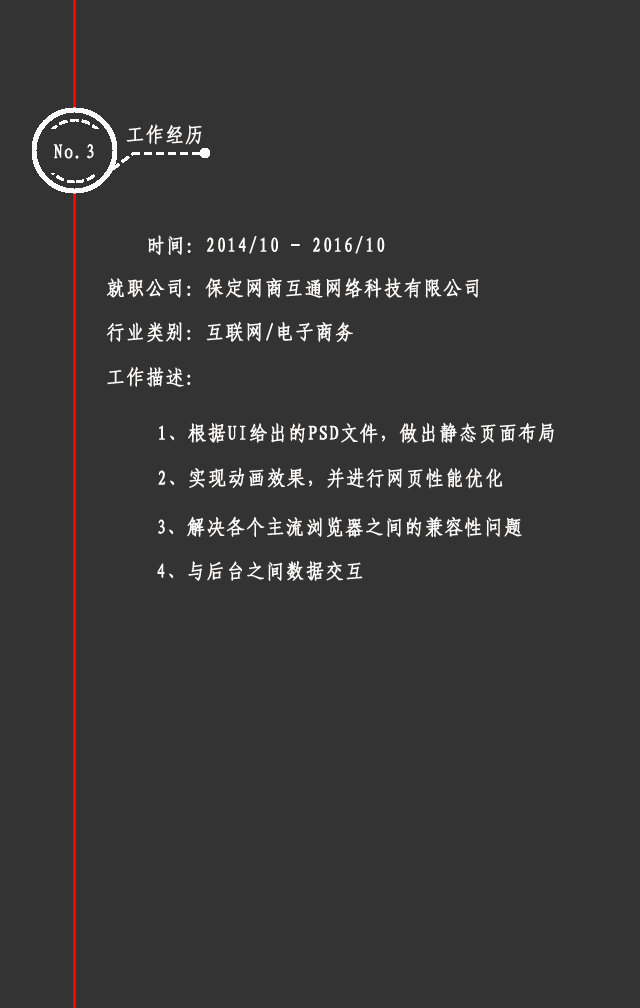
<style>
.page{position:relative;width:640px;height:1008px;background:#333333}
.page>*{position:absolute;margin:0}
.t1{font:20px "-G-s-u-n-0-0-m";letter-spacing:0.05em;color:#fefcfb;font-weight:bold;scale:0.92 1}
</style>
<div class="page">
<p class="t1" style="left:126px;top:124px;width:76px;height:21px">工作经历</p>
<p class="t1" style="left:53px;top:144px;width:41px;height:15px">No.3</p>
<p class="t1" style="left:148px;top:235px;width:237px;height:20px">时间：2014/10 - 2016/10</p>
<p class="t1" style="left:106px;top:277px;width:373px;height:21px">就职公司：保定网商互通网络科技有限公司</p>
<p class="t1" style="left:106px;top:321px;width:247px;height:22px">行业类别：互联网/电子商务</p>
<p class="t1" style="left:107px;top:367px;width:84px;height:20px">工作描述：</p>
<p class="t1" style="left:159px;top:422px;width:395px;height:22px">1、根据UI给出的PSD文件，做出静态页面布局</p>
<p class="t1" style="left:158px;top:467px;width:345px;height:22px">2、实现动画效果，并进行网页性能优化</p>
<p class="t1" style="left:158px;top:516px;width:364px;height:22px">3、解决各个主流浏览器之间的兼容性问题</p>
<p class="t1" style="left:157px;top:561px;width:206px;height:20px">4、与后台之间数据交互</p>
</div>
